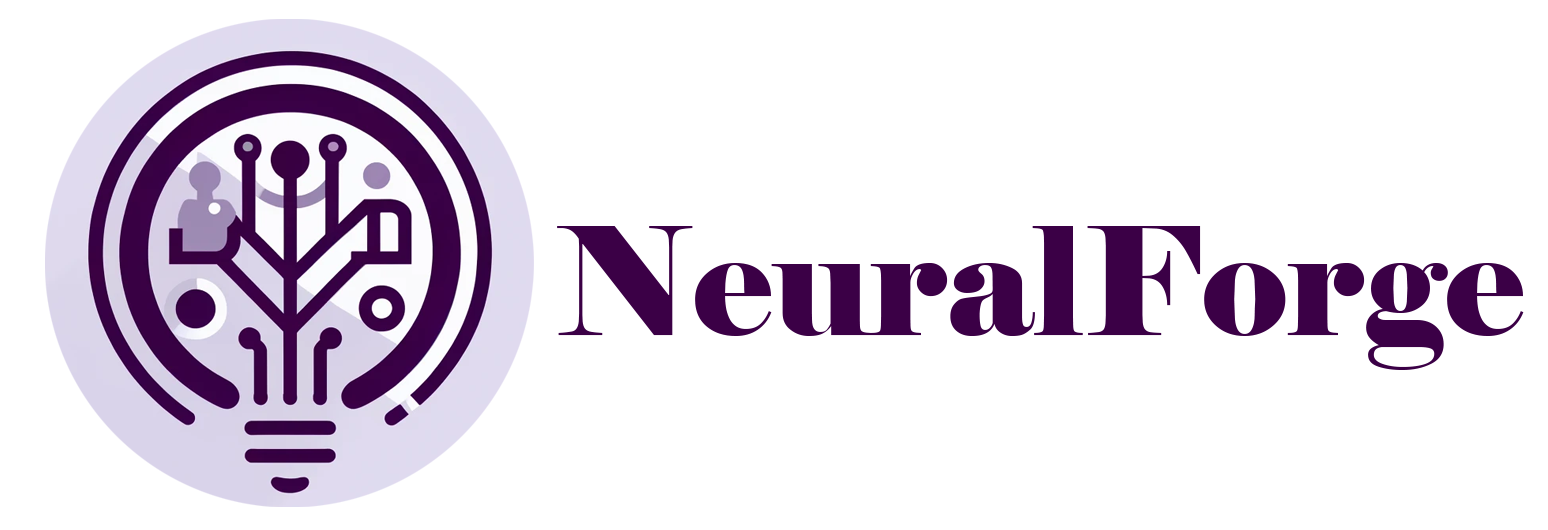
<style>
.page{position:relative;width:1548px;height:530px;background:#ffffff}
.page>*{position:absolute;margin:0}
.t1{font:150px "Elephant-Regular";color:#3b0046}
</style>
<div class="page">
<p class="t1" style="left:557px;top:226px;width:967px;height:144px">NeuralForge</p>
</div>
